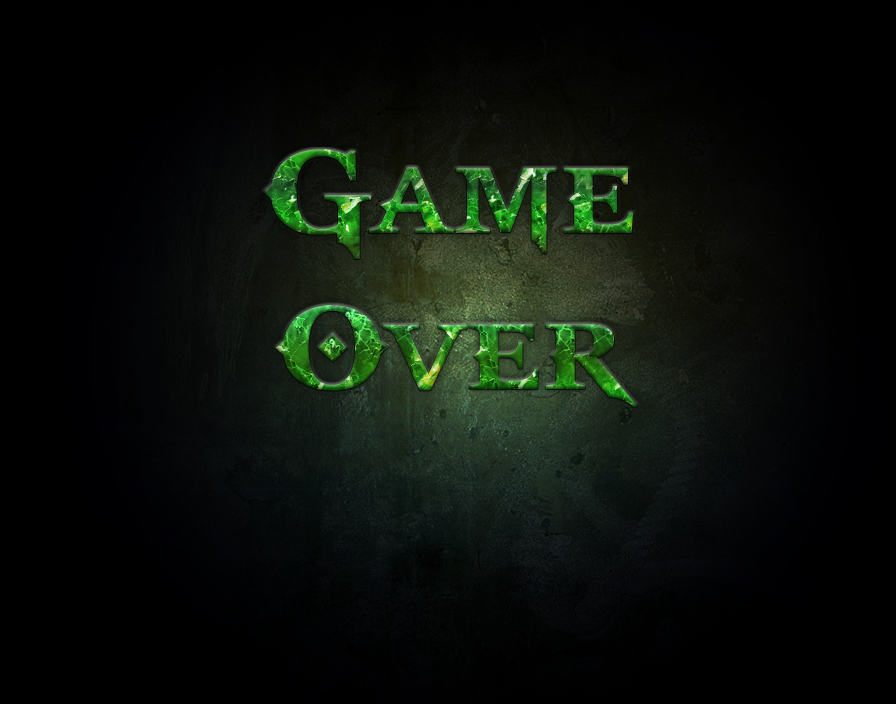
<style>
.page{position:relative;width:896px;height:704px}
.page>*{position:absolute;margin:0}
.t1{font:130px "GodOfWar"}
</style>
<div class="page">
<p class="t1" style="left:263px;top:149px;width:375px;height:258px;text-align:center">Game<br>Over</p>
</div>
